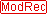
<style>
.page{position:relative;width:47px;height:14px;background:#ffffff}
.page>*{position:absolute;margin:0}
.t1{font:12px "ArialMT";color:#df0000}
</style>
<div class="page">
<p class="t1" style="left:1px;top:1px;width:45px;height:14px">ModRec</p>
</div>
